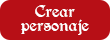
<style>
.page{position:relative;width:110px;height:40px;background:#b70f16}
.page>*{position:absolute;margin:0}
.t1{font:12px "BerryRotunda-Regular";color:#ffffff}
</style>
<div class="page">
<p class="t1" style="left:21px;top:5px;width:68px;height:30px;text-align:center">Crear<br>personaje</p>
</div>
